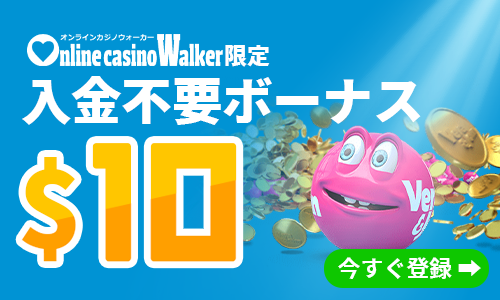
<style>
.page{position:relative;width:500px;height:300px;background:#0093d4}
.page>*{position:absolute;margin:0}
.t1{font:24px "KintoSans-Black";color:#ffffff}
.t2{font:52.5px "KintoSans-Black";color:#ffffff}
.t3{font:161.1px "Nikkyou-Sans"}
.t4{font:107.4px "KintoSans-Black"}
.t5{font:24px "KintoSans-Bold";color:#ffffff}
</style>
<div class="page">
<p class="t1" style="left:225px;top:45px;width:45px;height:22px">限定</p>
<p class="t2" style="left:22px;top:76px;width:399px;height:49px">入金不要ボーナス</p>
<p class="t3" style="left:92px;top:143px;width:145px;height:119px">10</p>
<p class="t4" style="left:22px;top:157px;width:54px;height:104px">$</p>
<p class="t5" style="left:338px;top:257px;width:143px;height:22px">今すぐ登録 ➡</p>
</div>
